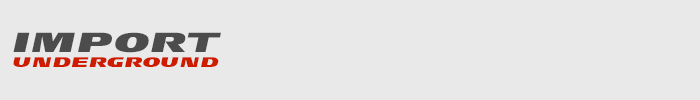
<style>
.page{position:relative;width:700px;height:100px;background:#e9e9e9}
.page>*{position:absolute;margin:0}
.t1{font:12px "MaximumLineSpeeder";color:#cd1c00}
.t2{font:23.9px "MaximumLineSpeeder";color:#4c4c4c}
</style>
<div class="page">
<p class="t1" style="left:13px;top:32px;width:208px;height:35px"><span class="t2">IMPORT<br></span>UNDERGROUND</p>
</div>
